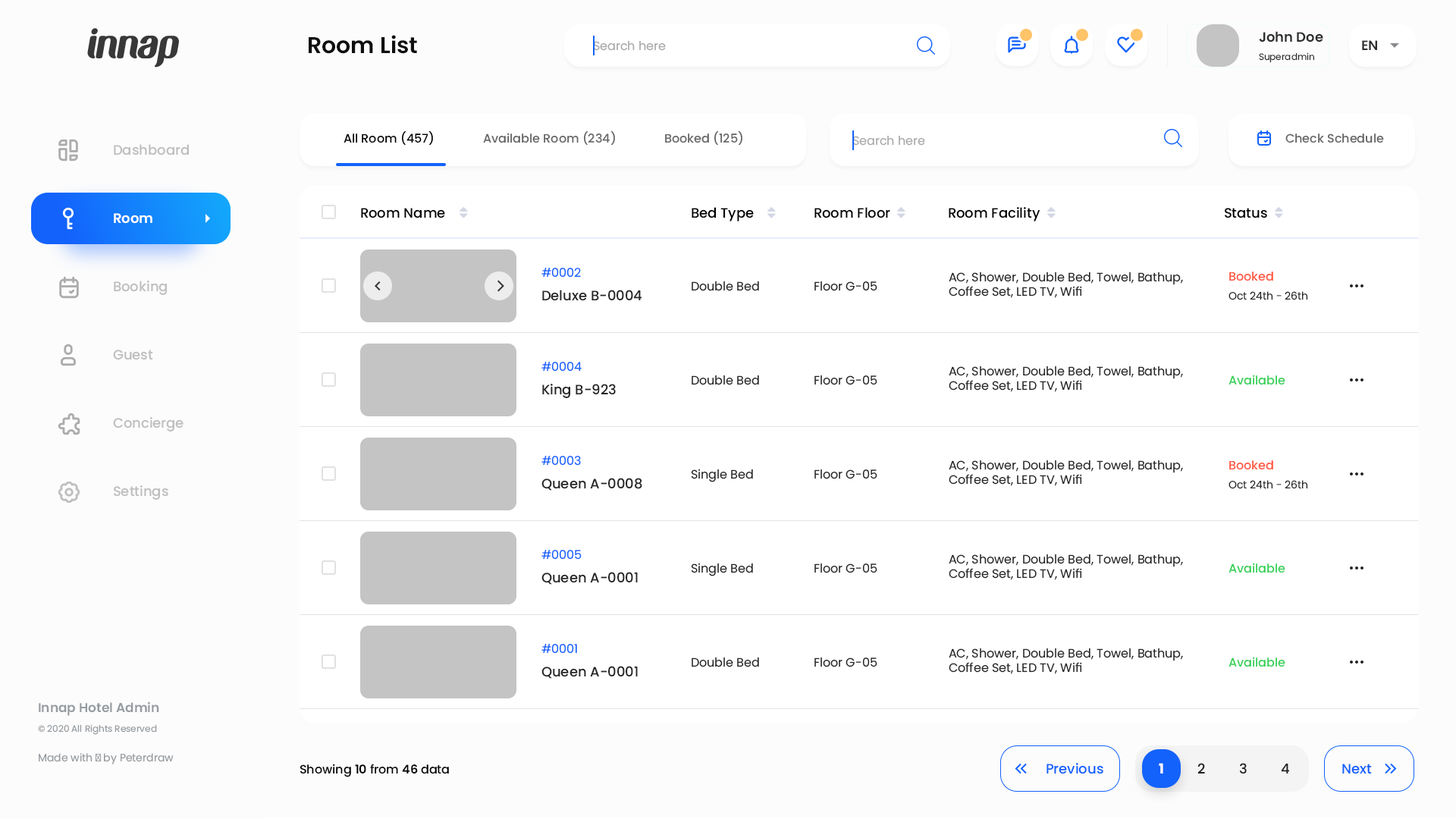
<style>
.page{position:relative;width:1456px;height:819px;background:#ffffff}
.page>*{position:absolute;margin:0}
.t1{font:22.7px "Poppins-SemiBold";color:#0f0f0f}
.t2{font:12.1px "Poppins-Regular";color:#aaaaaa}
.t3{font:13.6px "Poppins-SemiBold";color:#2e2e2e}
.t4{font:9.1px "Poppins-Regular";color:#2e2e2e}
.t5{font:12.1px "Poppins-Medium";color:#000000}
.t6{font:12.1px "Poppins-Medium";color:#666666}
.t7{font:13.6px "Poppins-Medium";color:#bfbfbf}
.t8{font:13.6px "Poppins-Medium";color:#000000}
.t9{font:13.6px "Poppins-SemiBold";color:#ffffff}
.t10{font:12.1px "Poppins-Regular";color:#1362fc}
.t11{font:12.1px "Poppins-Regular";color:#262626}
.t12{font:12.1px "Poppins-Medium";color:#ff5942}
.t13{font:13.6px "Poppins-Medium";color:#262626}
.t14{font:10.6px "Poppins-Regular";color:#262626}
.t15{font:12.1px "Poppins-Medium";color:#37d159}
.t16{font:9.1px/19.7px "Poppins-Regular";color:#969ba0}
.t17{font:12.9px/19.7px "Poppins-SemiBold";color:#969ba0}
.t18{font:10.6px "Poppins-Regular";color:#969ba0}
.t19{font:12.1px "Poppins-SemiBold";color:#000000}
.t20{font:13.6px "Poppins-Medium";color:#1362fc}
.t21{font:13.6px "Poppins-Bold";color:#ffffff}
.t22{font:13.6px "Poppins-Medium";color:#202020}
</style>
<div class="page">
<p class="t1" style="left:309px;top:35px;width:108px;height:19px">Room List</p>
<p class="t2" style="left:593px;top:41px;width:73px;height:10px">Search here</p>
<p class="t3" style="left:1259px;top:31px;width:64px;height:11px">John Doe</p>
<p class="t3" style="left:1362px;top:40px;width:15px;height:10px">EN</p>
<p class="t4" style="left:1259px;top:52px;width:55px;height:11px">Superadmin</p>
<p class="t5" style="left:344px;top:131px;width:89px;height:14px">All Room (457)</p>
<p class="t6" style="left:483px;top:131px;width:132px;height:14px">Available Room (234)</p>
<p class="t6" style="left:665px;top:131px;width:77px;height:14px">Booked (125)</p>
<p class="t2" style="left:852px;top:136px;width:73px;height:10px">Search here</p>
<p class="t6" style="left:1285px;top:133px;width:99px;height:10px">Check Schedule</p>
<p class="t7" style="left:114px;top:144px;width:75px;height:11px">Dashboard</p>
<p class="t8" style="left:361px;top:208px;width:84px;height:10px">Room Name</p>
<p class="t8" style="left:692px;top:207px;width:62px;height:14px">Bed Type</p>
<p class="t8" style="left:814px;top:207px;width:76px;height:11px">Room Floor</p>
<p class="t8" style="left:949px;top:207px;width:91px;height:14px">Room Facility</p>
<p class="t8" style="left:1225px;top:208px;width:42px;height:10px">Status</p>
<p class="t9" style="left:114px;top:213px;width:38px;height:11px">Room</p>
<p class="t10" style="left:541px;top:268px;width:40px;height:10px">#0002</p>
<p class="t7" style="left:114px;top:281px;width:53px;height:14px">Booking</p>
<p class="t11" style="left:692px;top:281px;width:67px;height:10px">Double Bed</p>
<p class="t11" style="left:814px;top:281px;width:63px;height:10px">Floor G-05</p>
<p class="t11" style="left:949px;top:272px;width:234px;height:26px">AC, Shower, Double Bed, Towel, Bathup, Coffee Set, LED TV, Wifi</p>
<p class="t12" style="left:1229px;top:271px;width:44px;height:10px">Booked</p>
<p class="t13" style="left:542px;top:290px;width:100px;height:11px">Deluxe B-0004</p>
<p class="t14" style="left:1228px;top:291px;width:80px;height:9px">Oct 24th - 26th</p>
<p class="t7" style="left:113px;top:350px;width:40px;height:10px">Guest</p>
<p class="t10" style="left:541px;top:362px;width:41px;height:10px">#0004</p>
<p class="t11" style="left:692px;top:375px;width:67px;height:10px">Double Bed</p>
<p class="t11" style="left:814px;top:375px;width:63px;height:10px">Floor G-05</p>
<p class="t11" style="left:949px;top:366px;width:234px;height:26px">AC, Shower, Double Bed, Towel, Bathup, Coffee Set, LED TV, Wifi</p>
<p class="t15" style="left:1228px;top:375px;width:57px;height:10px">Available</p>
<p class="t13" style="left:542px;top:384px;width:74px;height:14px">King B-923</p>
<p class="t7" style="left:113px;top:417px;width:71px;height:14px">Concierge</p>
<p class="t10" style="left:541px;top:456px;width:40px;height:10px">#0003</p>
<p class="t11" style="left:949px;top:460px;width:234px;height:26px">AC, Shower, Double Bed, Towel, Bathup, Coffee Set, LED TV, Wifi</p>
<p class="t12" style="left:1229px;top:460px;width:44px;height:10px">Booked</p>
<p class="t11" style="left:691px;top:469px;width:62px;height:13px">Single Bed</p>
<p class="t11" style="left:814px;top:469px;width:63px;height:10px">Floor G-05</p>
<p class="t7" style="left:114px;top:485px;width:54px;height:15px">Settings</p>
<p class="t13" style="left:541px;top:478px;width:101px;height:13px">Queen A-0008</p>
<p class="t14" style="left:1228px;top:480px;width:80px;height:9px">Oct 24th - 26th</p>
<p class="t10" style="left:541px;top:550px;width:41px;height:10px">#0005</p>
<p class="t11" style="left:949px;top:554px;width:234px;height:26px">AC, Shower, Double Bed, Towel, Bathup, Coffee Set, LED TV, Wifi</p>
<p class="t11" style="left:691px;top:563px;width:62px;height:13px">Single Bed</p>
<p class="t11" style="left:814px;top:563px;width:63px;height:10px">Floor G-05</p>
<p class="t15" style="left:1228px;top:563px;width:57px;height:10px">Available</p>
<p class="t13" style="left:541px;top:572px;width:97px;height:13px">Queen A-0001</p>
<p class="t10" style="left:541px;top:644px;width:36px;height:10px">#0001</p>
<p class="t11" style="left:949px;top:648px;width:234px;height:26px">AC, Shower, Double Bed, Towel, Bathup, Coffee Set, LED TV, Wifi</p>
<p class="t13" style="left:541px;top:666px;width:97px;height:13px">Queen A-0001</p>
<p class="t11" style="left:692px;top:657px;width:67px;height:10px">Double Bed</p>
<p class="t11" style="left:814px;top:657px;width:63px;height:10px">Floor G-05</p>
<p class="t15" style="left:1228px;top:657px;width:57px;height:10px">Available</p>
<p class="t16" style="left:38px;top:701px;width:121px;height:34px"><span class="t17">Innap Hotel Admin<br></span>© 2020 All Rights Reserved</p>
<p class="t18" style="left:39px;top:753px;width:135px;height:11px">Made with ♥ by Peterdraw</p>
<p class="t5" style="left:300px;top:764px;width:149px;height:13px">Showing <span class="t19">10 </span>from <span class="t19">46 </span>data</p>
<p class="t20" style="left:1046px;top:763px;width:57px;height:11px">Previous</p>
<p class="t21" style="left:1159px;top:763px;width:4px;height:10px">1</p>
<p class="t22" style="left:1197px;top:763px;width:8px;height:10px">2</p>
<p class="t22" style="left:1239px;top:763px;width:8px;height:11px">3</p>
<p class="t22" style="left:1281px;top:763px;width:9px;height:11px">4</p>
<p class="t20" style="left:1342px;top:764px;width:30px;height:10px">Next</p>
</div>
